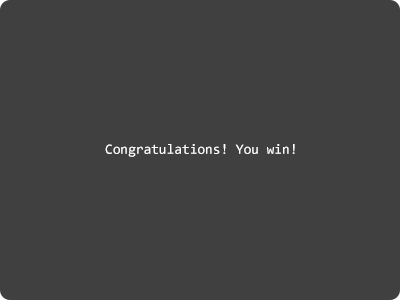
<style>
.page{position:relative;width:400px;height:300px;background:#404040}
.page>*{position:absolute;margin:0}
.t1{font:14px "Consolas";color:#ffffff}
</style>
<div class="page">
<p class="t1" style="left:105px;top:144px;width:190px;height:13px">Congratulations! You win!</p>
</div>
